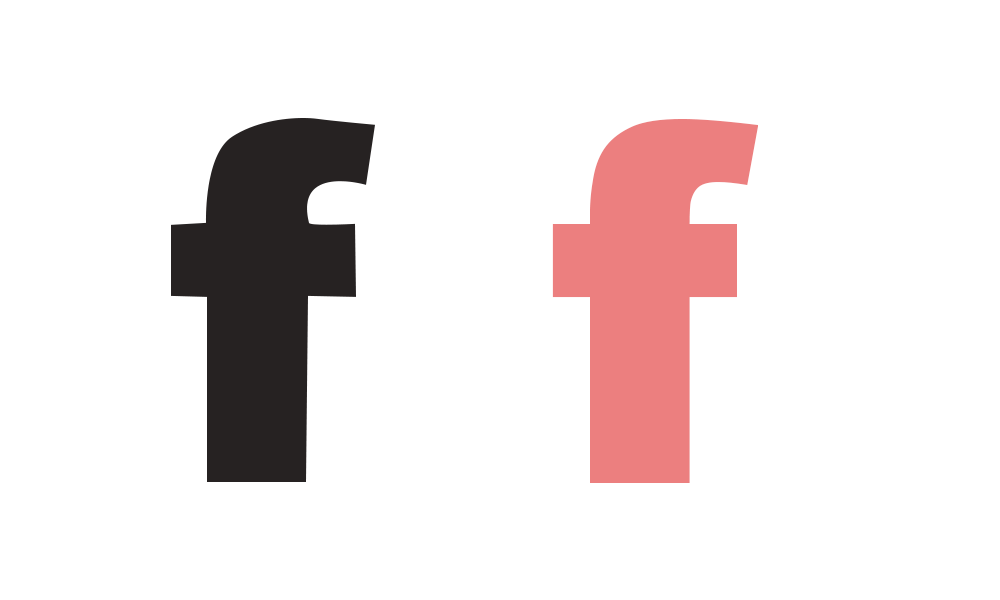
<style>
.page{position:relative;width:1000px;height:600px;background:#ffffff}
.page>*{position:absolute;margin:0}
.t1{font:500px "Arial-Black";color:#ec7f7f}
</style>
<div class="page">
<p class="t1" style="left:552px;top:119px;width:206px;height:364px">f</p>
</div>
